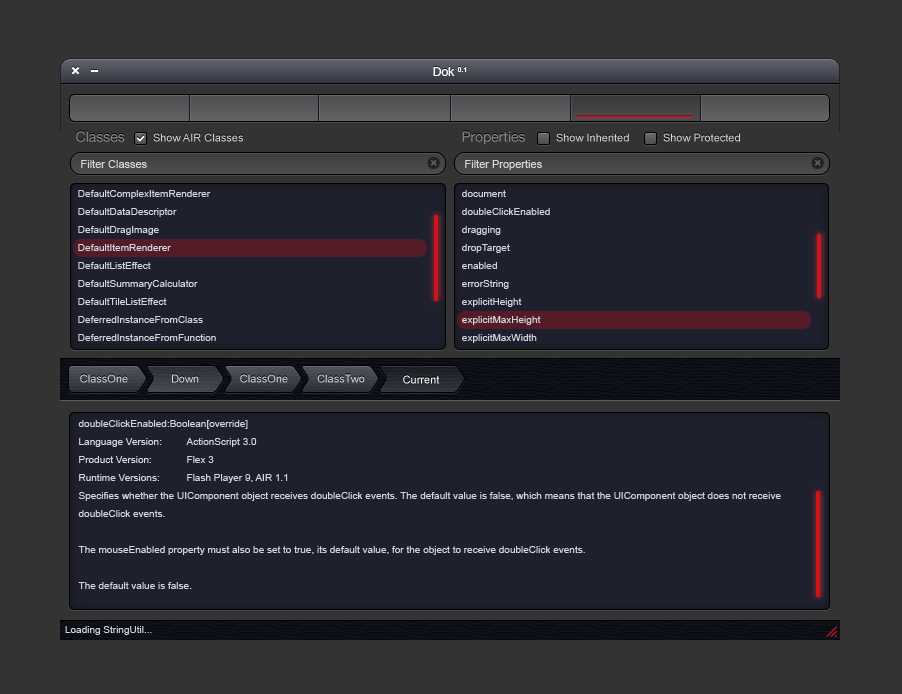
<style>
.page{position:relative;width:902px;height:694px;background:#333333}
.page>*{position:absolute;margin:0}
.t1{font:12px "HelveticaNeueLTStd-Roman"}
.t2{font:12px "HelveticaNeueLTStd-Roman";color:#ffffff}
.t3{font:11px "ArialMT";color:#d3d5dd}
.t4{font:10px/18px "ArialMT";color:#d3d5dd}
.t5{font:10px "ArialMT"}
.t6{font:10px "ArialMT";color:#d3d5dd}
</style>
<div class="page">
<p class="t1" style="left:433px;top:66px;width:34px;height:9px">Dok 0.1</p>
<p class="t2" style="left:433px;top:67px;width:34px;height:9px">Dok 0.1</p>
<p class="t3" style="left:81px;top:160px;width:66px;height:8px">Filter Classes</p>
<p class="t3" style="left:465px;top:160px;width:77px;height:10px">Filter Properties</p>
<p class="t4" style="left:78px;top:190px;width:138px;height:151px">DefaultComplexItemRenderer<br>DefaultDataDescriptor<br>DefaultDragImage<br>DefaultItemRenderer<br>DefaultListEffect<br>DefaultSummaryCalculator<br>DefaultTileListEffect<br>DeferredInstanceFromClass<br>DeferredInstanceFromFunction</p>
<p class="t4" style="left:462px;top:190px;width:88px;height:153px">document<br>doubleClickEnabled<br>dragging<br>dropTarget<br>enabled<br>errorString<br>explicitHeight<br>explicitMaxHeight<br>explicitMaxWidth</p>
<p class="t4" style="left:78px;top:420px;width:703px;height:169px">doubleClickEnabled:Boolean[override]<br>Language Version:  ActionScript 3.0<br>Product Version:  Flex 3<br>Runtime Versions:  Flash Player 9, AIR 1.1<br>Specifies whether the UIComponent object receives doubleClick events. The default value is false, which means that the UIComponent object does not receive doubleClick events.<br><br>The mouseEnabled property must also be set to true, its default value, for the object to receive doubleClick events.<br><br>The default value is false.</p>
<p class="t5" style="left:65px;top:625px;width:87px;height:9px">Loading StringUtil...</p>
<p class="t6" style="left:65px;top:626px;width:87px;height:9px">Loading StringUtil...</p>
</div>
